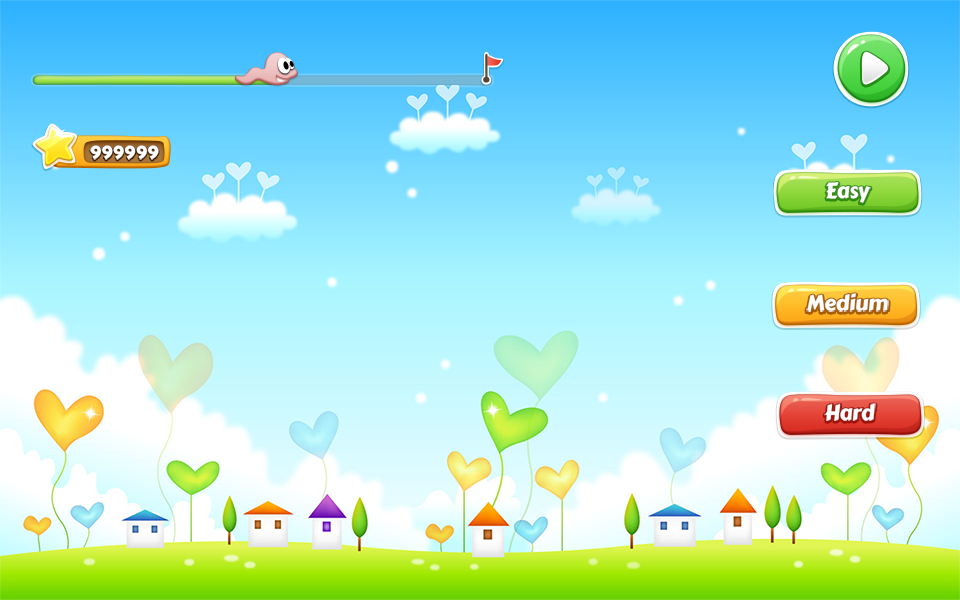
<style>
.page{position:relative;width:960px;height:600px}
.page>*{position:absolute;margin:0}
.t1{font:17.8px "Skranji-Bold";letter-spacing:0.025em;color:#ffffff}
.t2{font:21.4px "CarterOne";letter-spacing:-0.02em;color:#ffffff}
</style>
<div class="page">
<p class="t1" style="left:90px;top:145px;width:69px;height:15px">999999</p>
<p class="t2" style="left:826px;top:182px;width:45px;height:21px">Easy</p>
<p class="t2" style="left:806px;top:293px;width:83px;height:19px">Medium</p>
<p class="t2" style="left:824px;top:403px;width:52px;height:18px">Hard</p>
</div>
